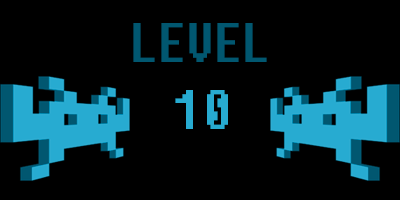
<style>
.page{position:relative;width:400px;height:200px;background:#000000}
.page>*{position:absolute;margin:0}
.t1{font:55.6px "Fixedsys";scale:0.8 1}
</style>
<div class="page">
<p class="t1" style="left:133px;top:23px;width:134px;height:106px;text-align:center">LEVEL<br>10</p>
</div>
